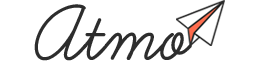
<style>
.page{position:relative;width:260px;height:61px;background:#ffffff}
.page>*{position:absolute;margin:0}
.t1{font:84.9px "LearningCurve-Bold";color:#2d2d2d}
</style>
<div class="page">
<p class="t1" style="left:34px;top:4px;width:158px;height:57px">Atmo</p>
</div>
